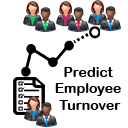
<style>
.page{position:relative;width:128px;height:128px;background:#ffffff}
.page>*{position:absolute;margin:0}
.t1{font:14px "ArialRoundedMTBold";color:#000000}
</style>
<div class="page">
<p class="t1" style="left:55px;top:67px;width:66px;height:43px;text-align:center">Predict <br>Employee <br>Turnover</p>
</div>
